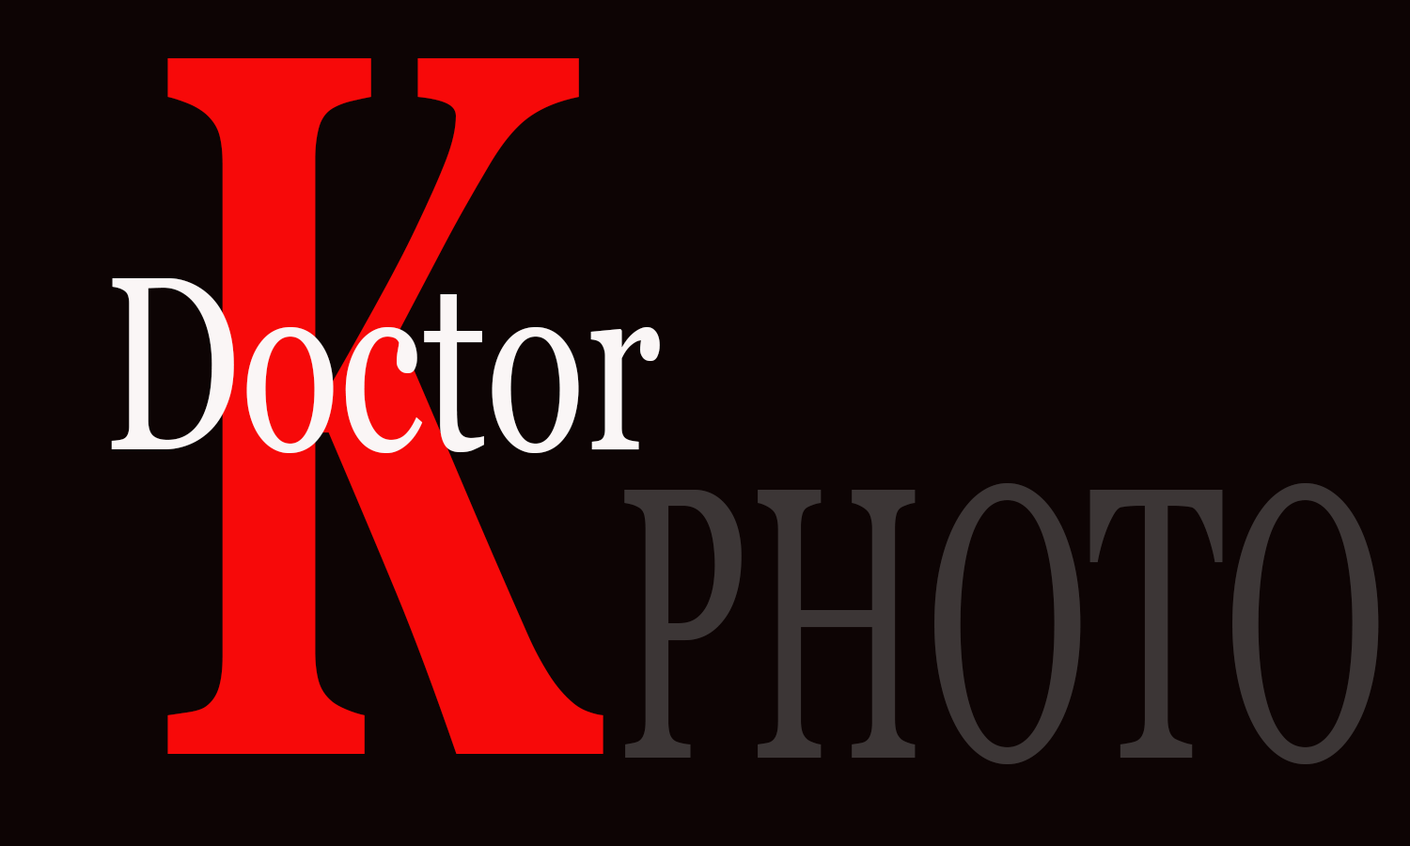
<style>
.page{position:relative;width:1410px;height:846px;background:#0d0404}
.page>*{position:absolute;margin:0}
.t1{font:1003.3px "Georgia-Bold";color:#f70909;scale:0.53 1}
.t2{font:246.1px "Georgia";color:#faf6f6;scale:0.75 1}
.t3{font:387.5px "Georgia";color:#3c3636;scale:0.56 1}
</style>
<div class="page">
<p class="t1" style="left:167px;top:58px;width:436px;height:696px">K</p>
<p class="t2" style="left:111px;top:278px;width:549px;height:175px">Doctor</p>
<p class="t3" style="left:624px;top:483px;width:755px;height:281px">PHOTO</p>
</div>
